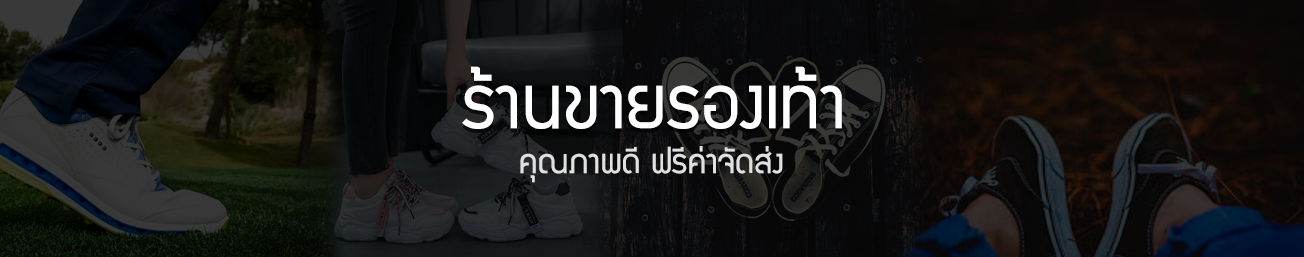
<style>
.page{position:relative;width:1304px;height:257px}
.page>*{position:absolute;margin:0}
.t1{font:81px "supermarket";color:#ffffff}
.t2{font:37px "supermarket";color:#e0e0e0}
</style>
<div class="page">
<p class="t1" style="left:462px;top:66px;width:380px;height:63px">ร้านขายรองเท้า</p>
<p class="t2" style="left:520px;top:146px;width:263px;height:37px">คุณภาพดี ฟรีค่าจัดส่ง</p>
</div>
